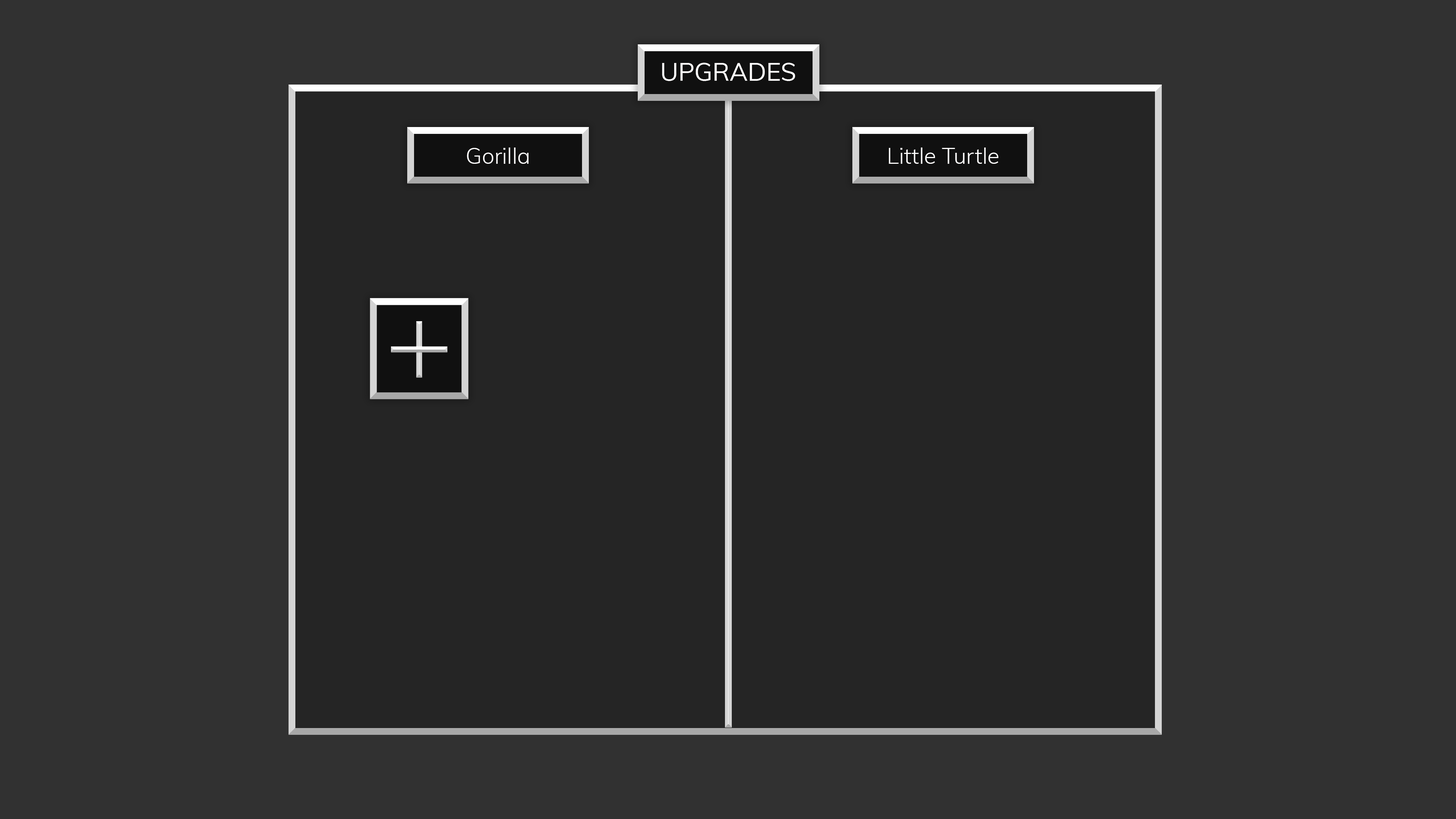
<style>
.page{position:relative;width:1456px;height:819px;background:#313131}
.page>*{position:absolute;margin:0}
.t1{font:24.9px "Muli-Regular";color:#fffefe}
.t2{font:22.2px "Muli-Light";color:#fffefe}
.t3{font:114.4px "Muli-Light"}
</style>
<div class="page">
<p class="t1" style="left:662px;top:63px;width:133px;height:18px">UPGRADES</p>
<p class="t2" style="left:467px;top:147px;width:62px;height:17px">Gorilla</p>
<p class="t2" style="left:889px;top:147px;width:109px;height:17px">Little Turtle</p>
<p class="t3" style="left:391px;top:321px;width:56px;height:57px">+</p>
</div>
